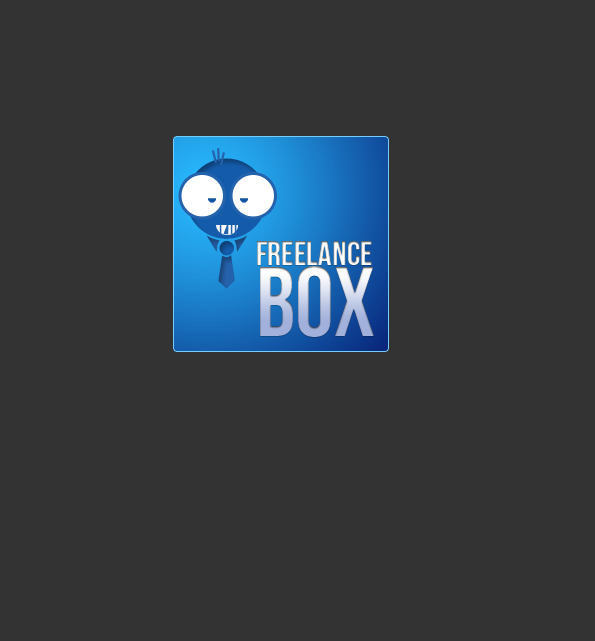
<style>
.page{position:relative;width:595px;height:641px;background:#333333}
.page>*{position:absolute;margin:0}
.t1{font:34.4px/99.9px "BebasNeue"}
.t2{font:97.9px/71.5px "BebasNeue"}
</style>
<div class="page">
<p class="t1" style="left:257px;top:241px;width:117px;height:96px">FREELANCE<br><span class="t2">BOX</span></p>
</div>
